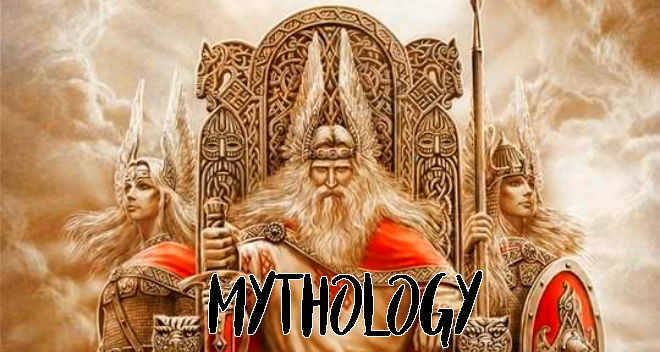
<style>
.page{position:relative;width:660px;height:352px}
.page>*{position:absolute;margin:0}
.t1{font:62px "BeautyandtheBeast";color:#000000}
</style>
<div class="page">
<p class="t1" style="left:209px;top:271px;width:273px;height:76px">Mythology</p>
</div>
